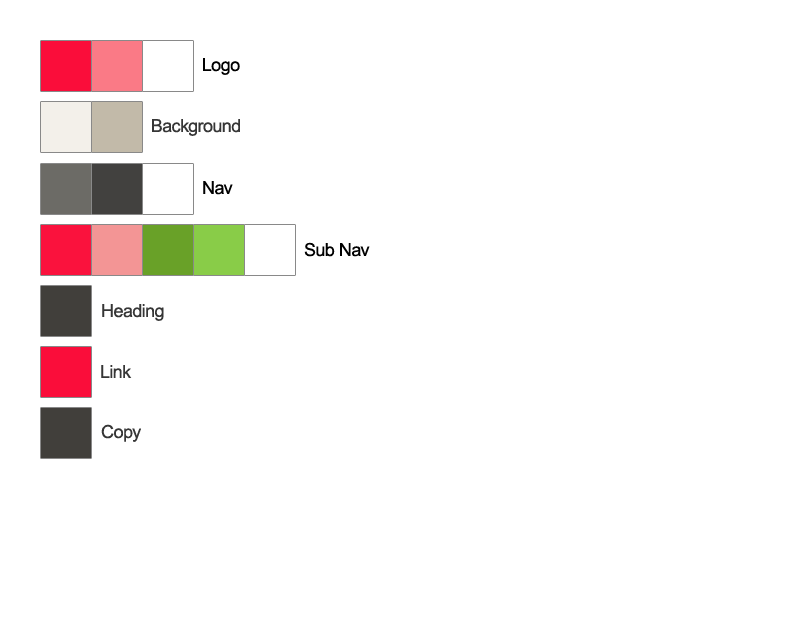
<style>
.page{position:relative;width:800px;height:622px;background:#ffffff}
.page>*{position:absolute;margin:0}
.t1{font:18px "ArialMT";letter-spacing:-0.025em;color:#000000}
.t2{font:18px "ArialMT";letter-spacing:-0.025em;color:#363636}
</style>
<div class="page">
<p class="t1" style="left:203px;top:58px;width:37px;height:17px">Logo</p>
<p class="t2" style="left:152px;top:119px;width:88px;height:17px">Background</p>
<p class="t1" style="left:203px;top:181px;width:30px;height:14px">Nav</p>
<p class="t1" style="left:304px;top:242px;width:66px;height:15px">Sub Nav</p>
<p class="t2" style="left:102px;top:304px;width:62px;height:17px">Heading</p>
<p class="t2" style="left:101px;top:365px;width:31px;height:13px">Link</p>
<p class="t2" style="left:101px;top:424px;width:40px;height:18px">Copy</p>
</div>
